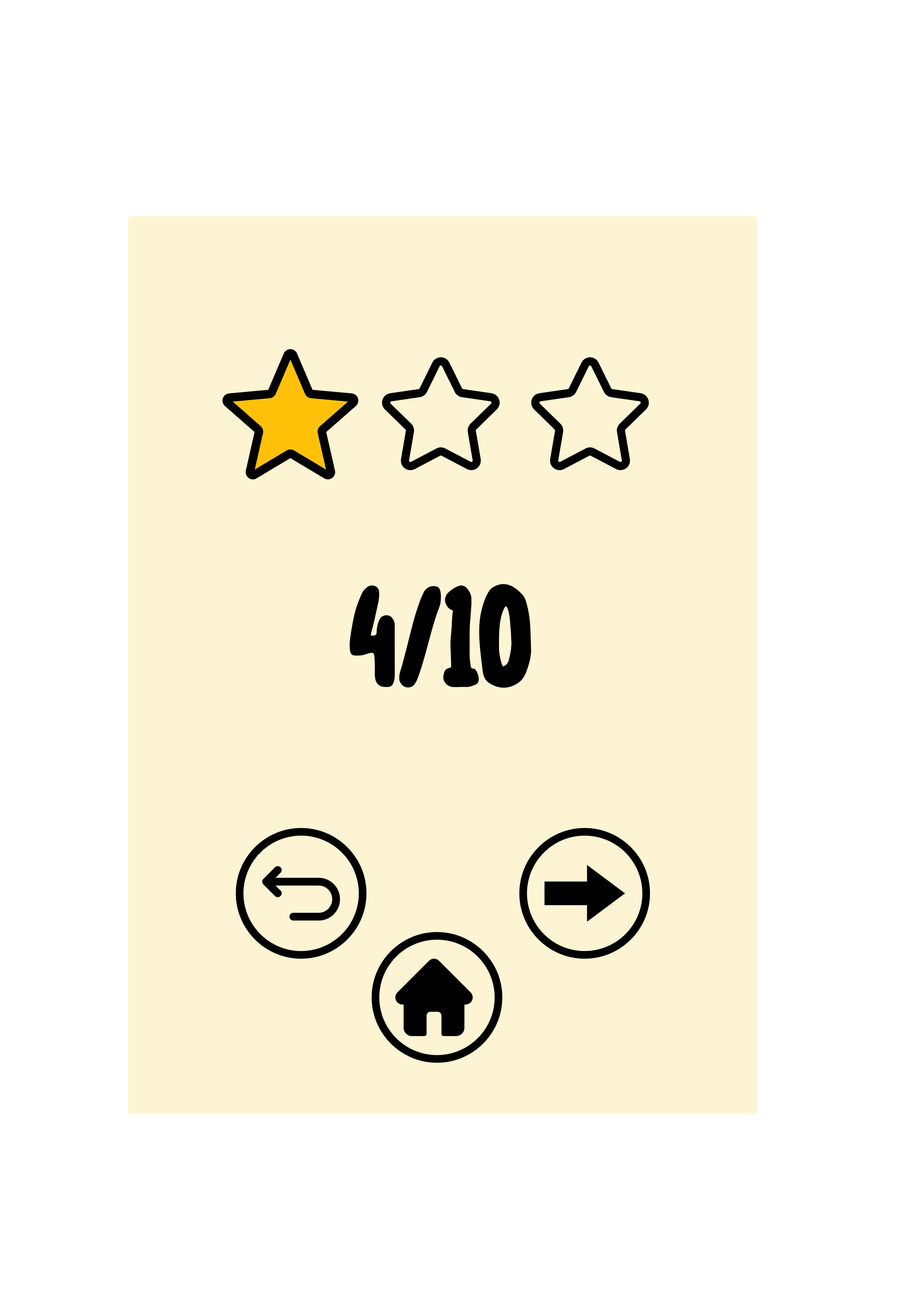
<style>
.page{position:relative;width:918px;height:1299px;background:#ffffff}
.page>*{position:absolute;margin:0}
.t1{font:55.5px "halloweenblack";color:#000000}
</style>
<div class="page">
<p class="t1" style="left:349px;top:584px;width:182px;height:104px">4/10</p>
</div>
